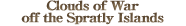
<style>
.page{position:relative;width:186px;height:26px;background:#ffffff}
.page>*{position:absolute;margin:0}
.t1{font:12.8px/12px "RyuminPro-ExBold";letter-spacing:-0.08em;color:#6b573f;font-weight:bold;scale:1.18 1}
</style>
<div class="page">
<p class="t1" style="left:21px;top:0px;width:143px;height:25px;text-align:center">Clouds of War<br>off the Spratly Islands</p>
</div>
